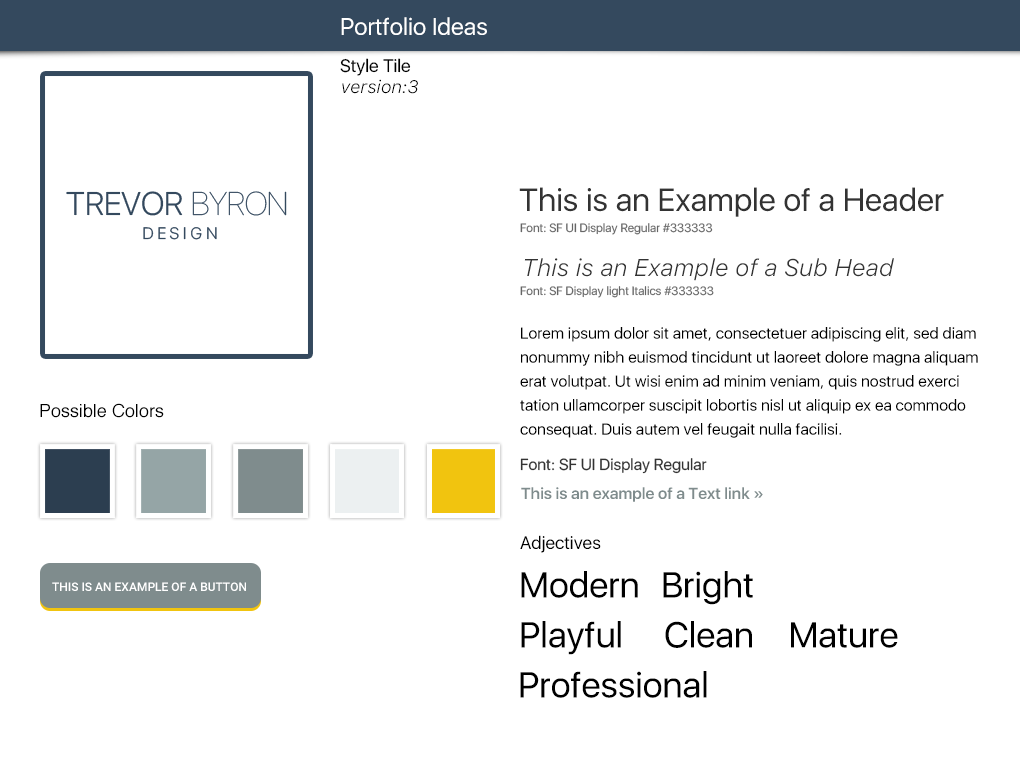
<style>
.page{position:relative;width:1020px;height:760px;background:#ffffff}
.page>*{position:absolute;margin:0}
.t1{font:24px "SFUIDisplay-Regular";color:#ffffff}
.t2{font:18px "SFUIDisplay-Regular";color:#000000}
.t3{font:18px "SFUIText-LightItalic";color:#000000}
.t4{font:32px "SFUIDisplay-Regular";color:#333333}
.t5{font:12px "SFUIDisplay-Regular";color:#666666}
.t6{font:24px "SFUIText-LightItalic";color:#333333}
.t7{font:16px/24px "SFUIDisplay-Regular";color:#000000}
.t8{font:18px "Helvetica";color:#000000}
.t9{font:16px "SFUIDisplay-Regular";color:#333333}
.t10{font:16px "SFUIDisplay-Semibold";color:#7f8c8d}
.t11{font:12px "Roboto-Medium";color:#ffffff;text-transform:uppercase}
.t12{font:36px "SFUIDisplay-Regular";color:#000000}
</style>
<div class="page">
<p class="t1" style="left:341px;top:17px;width:146px;height:18px">Portfolio Ideas</p>
<p class="t2" style="left:340px;top:58px;width:71px;height:18px">Style Tile</p>
<p class="t3" style="left:342px;top:79px;width:76px;height:15px">version:3</p>
<p class="t4" style="left:519px;top:187px;width:425px;height:30px">This is an Example of a Header</p>
<p class="t5" style="left:520px;top:223px;width:193px;height:12px">Font: SF UI Display Regular #333333</p>
<p class="t6" style="left:524px;top:258px;width:370px;height:23px">This is an Example of a Sub Head</p>
<p class="t5" style="left:520px;top:286px;width:194px;height:12px">Font: SF Display light Italics #333333</p>
<p class="t7" style="left:520px;top:327px;width:458px;height:111px">Lorem ipsum dolor sit amet, consectetuer adipiscing elit, sed diam nonummy nibh euismod tincidunt ut laoreet dolore magna aliquam erat volutpat. Ut wisi enim ad minim veniam, quis nostrud exerci tation ullamcorper suscipit lobortis nisl ut aliquip ex ea commodo consequat. Duis autem vel feugait nulla facilisi.</p>
<p class="t8" style="left:40px;top:403px;width:124px;height:15px">Possible Colors</p>
<p class="t9" style="left:520px;top:458px;width:187px;height:16px">Font: SF UI Display Regular</p>
<p class="t10" style="left:521px;top:487px;width:242px;height:15px">This is an example of a Text link »</p>
<p class="t2" style="left:520px;top:535px;width:81px;height:18px">Adjectives</p>
<p class="t11" style="left:52px;top:582px;width:194px;height:9px">This is an example of a Button</p>
<p class="t12" style="left:521px;top:571px;width:117px;height:27px">Modern</p>
<p class="t12" style="left:663px;top:571px;width:90px;height:34px">Bright</p>
<p class="t12" style="left:521px;top:621px;width:100px;height:34px">Playful</p>
<p class="t12" style="left:665px;top:621px;width:233px;height:27px">Clean    Mature</p>
<p class="t12" style="left:520px;top:671px;width:187px;height:27px">Professional</p>
</div>
